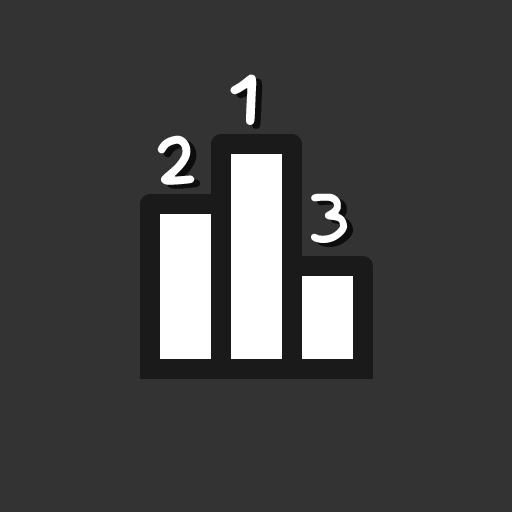
<style>
.page{position:relative;width:512px;height:512px;background:#333333}
.page>*{position:absolute;margin:0}
.t1{font:90.3px "Brutal_bounce-Regular";color:#ffffff}
</style>
<div class="page">
<p class="t1" style="left:230px;top:74px;width:27px;height:51px">1</p>
<p class="t1" style="left:157px;top:135px;width:38px;height:50px">2</p>
<p class="t1" style="left:311px;top:193px;width:37px;height:50px">3</p>
</div>
